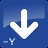
<style>
.page{position:relative;width:48px;height:48px;background:#214796}
.page>*{position:absolute;margin:0}
.t1{font:10.7px "LucidaConsole"}
</style>
<div class="page">
<p class="t1" style="left:3px;top:38px;width:13px;height:7px">-Y</p>
</div>
